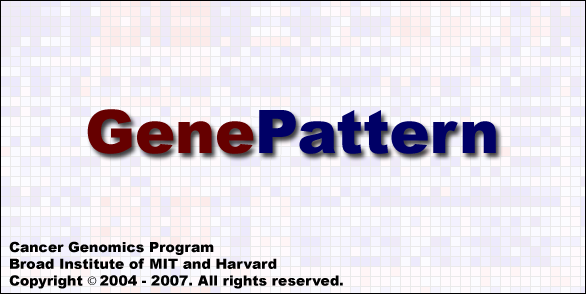
<style>
.page{position:relative;width:586px;height:294px}
.page>*{position:absolute;margin:0}
.t1{font:60px "Arial-Black";color:#000066}
.t2{font:60px "Arial-Black";color:#660000}
.t3{font:14px "Arial-Black";color:#000000}
.t4{font:14px "MyriadPro-Regular";color:#000000}
</style>
<div class="page">
<p class="t1" style="left:87px;top:109px;width:409px;height:45px"><span class="t2">Gene</span>Pattern</p>
<p class="t3" style="left:9px;top:241px;width:334px;height:48px">Cancer Genomics Program<br>Broad Institute of MIT and Harvard<br>Copyright <span class="t4">© </span>2004 - 2007. All rights reserved.</p>
</div>
